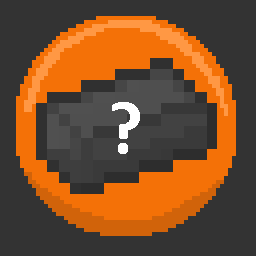
<style>
.page{position:relative;width:256px;height:256px;background:#333333}
.page>*{position:absolute;margin:0}
.t1{font:75px "Calibri-Bold";color:#ffffff}
</style>
<div class="page">
<p class="t1" style="left:112px;top:102px;width:28px;height:52px">?</p>
</div>
